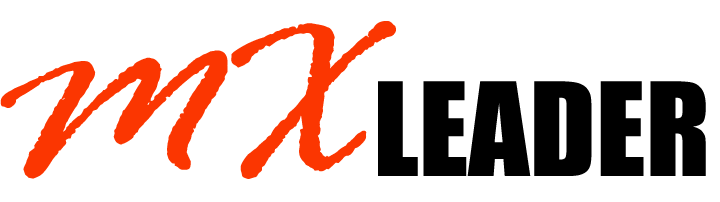
<style>
.page{position:relative;width:720px;height:202px;background:#ffffff}
.page>*{position:absolute;margin:0}
.t1{font:240px "RageItalic";color:#fb3601}
.t2{font:120px "Impact";color:#000000}
</style>
<div class="page">
<p class="t1" style="left:0px;top:21px;width:396px;height:158px">MX</p>
<p class="t2" style="left:378px;top:81px;width:328px;height:95px">LEADER</p>
</div>
